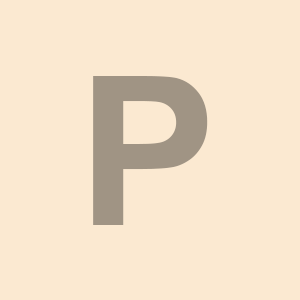
<style>
.page{position:relative;width:300px;height:300px;background:#fbe9d1}
.page>*{position:absolute;margin:0}
.t1{font:208.3px "Arial-BoldMT";letter-spacing:0.05em;color:#a09484}
</style>
<div class="page">
<p class="t1" style="left:93px;top:76px;width:115px;height:149px">P</p>
</div>
